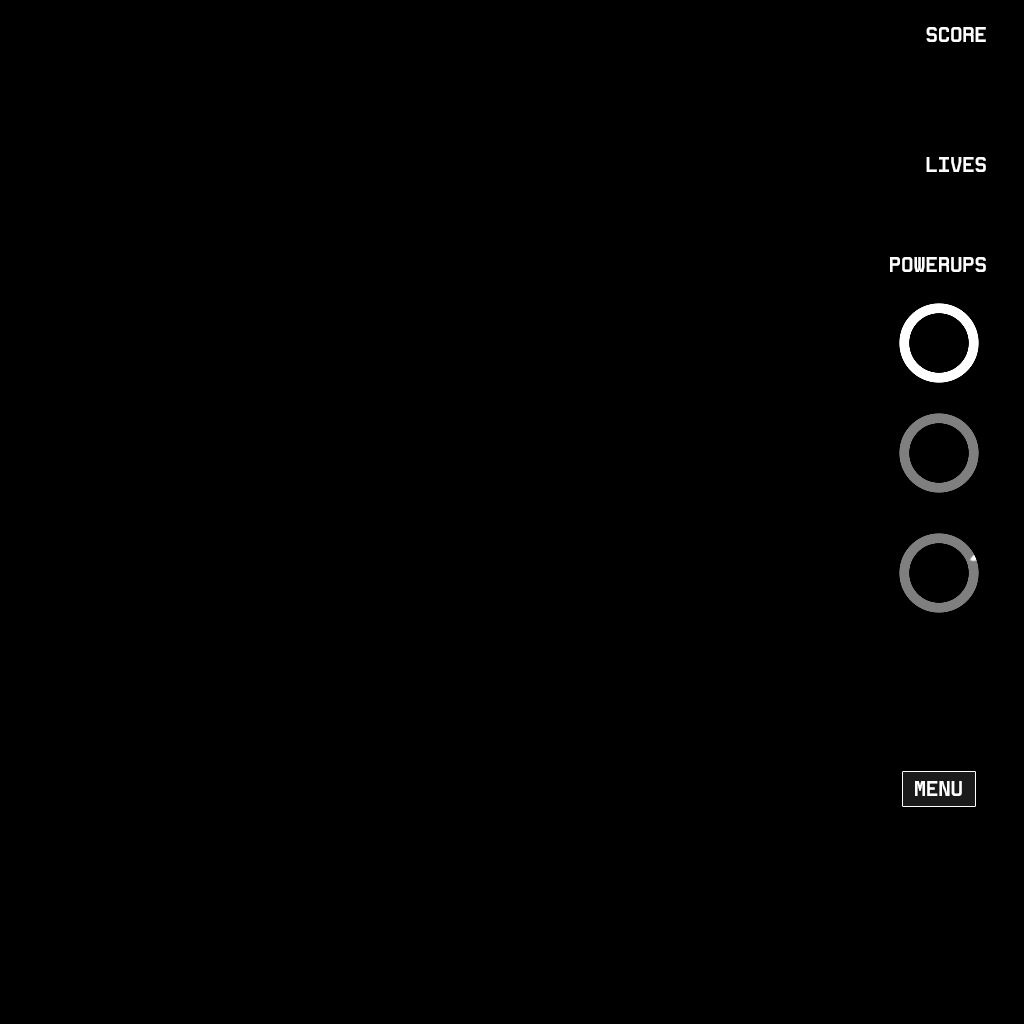
<style>
.page{position:relative;width:1024px;height:1024px;background:#000000}
.page>*{position:absolute;margin:0}
.t1{font:10px "5Ceta-Mono";letter-spacing:0.1em;color:#ffffff}
</style>
<div class="page">
<p class="t1" style="left:926px;top:27px;width:60px;height:15px">SCORE</p>
<p class="t1" style="left:926px;top:157px;width:60px;height:15px">LIVES</p>
<p class="t1" style="left:890px;top:257px;width:96px;height:15px">POWERUPS</p>
<p class="t1" style="left:915px;top:781px;width:47px;height:15px">MENU</p>
</div>
